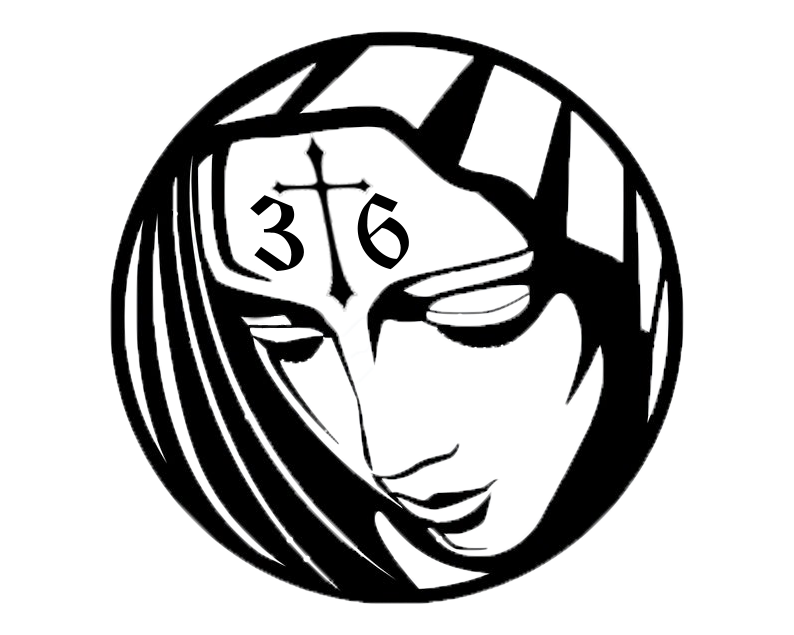
<style>
.page{position:relative;width:794px;height:635px;background:#ffffff}
.page>*{position:absolute;margin:0}
.t1{font:120.3px "CloisterBlack-Light";color:#000000}
</style>
<div class="page">
<p class="t1" style="left:250px;top:193px;width:159px;height:78px;rotate:-2deg">3 6</p>
</div>
